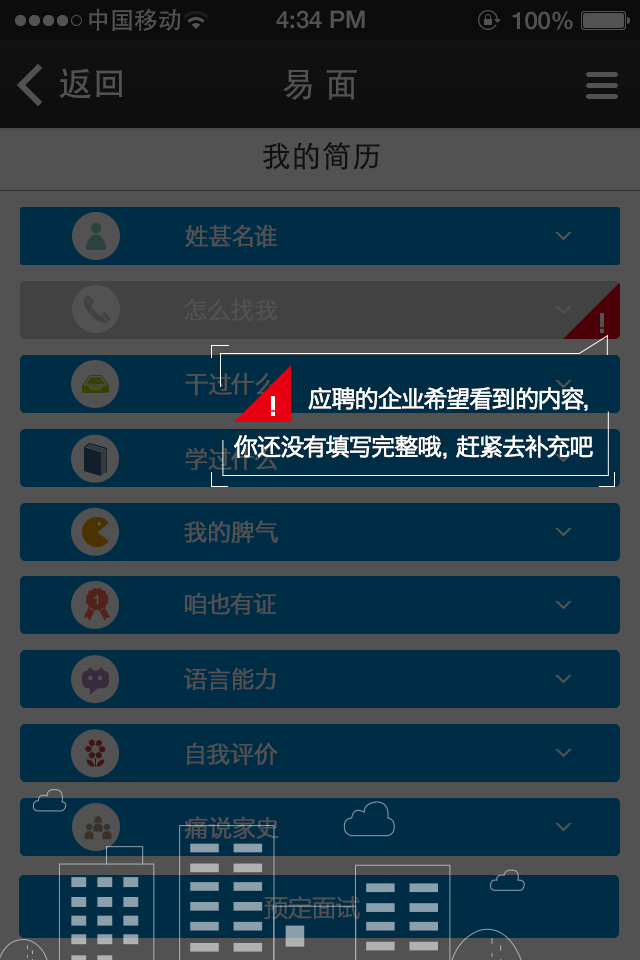
<style>
.page{position:relative;width:640px;height:960px;background:#002d46}
.page>*{position:absolute;margin:0}
.t1{font:24px "AdobeHeitiStd-Regular";color:#525252}
.t2{font:24px "HelveticaNeue-Medium";color:#525252}
.t3{font:34px "AdobeHeitiStd-Regular";color:#525252}
.t4{font:34px "STHeitiSC-Light";color:#525252;font-weight:bold}
.t5{font:29.2px "STHeitiSC-Light";color:#101010;font-weight:bold}
.t6{font:24px "HiraginoSansGB-W3";letter-spacing:-0.025em;color:#525252;font-weight:bold}
.t7{font:24px/48px "HiraginoSansGB-W3";letter-spacing:-0.025em;color:#ffffff}
.t8{font:24px "MicrosoftYaHei";color:#525252}
</style>
<div class="page">
<p class="t1" style="left:89px;top:8px;width:92px;height:23px">中国移动</p>
<p class="t2" style="left:276px;top:10px;width:89px;height:19px">4:34 PM</p>
<p class="t2" style="left:512px;top:11px;width:61px;height:19px">100%</p>
<p class="t3" style="left:59px;top:68px;width:63px;height:31px">返回</p>
<p class="t4" style="left:283px;top:69px;width:74px;height:31px">易 面</p>
<p class="t5" style="left:263px;top:142px;width:117px;height:28px">我的简历</p>
<p class="t6" style="left:185px;top:224px;width:92px;height:24px">姓甚名谁</p>
<p class="t6" style="left:184px;top:298px;width:94px;height:23px">怎么找我</p>
<p class="t6" style="left:185px;top:373px;width:93px;height:23px">干过什么</p>
<p class="t7" style="left:234px;top:386px;width:359px;height:73px">应聘的企业希望看到的内容，<br>你还没有填写完整哦，赶紧去补充吧</p>
<p class="t6" style="left:185px;top:448px;width:92px;height:22px">学过什么</p>
<p class="t6" style="left:184px;top:520px;width:94px;height:23px">我的脾气</p>
<p class="t6" style="left:184px;top:592px;width:92px;height:23px">咱也有证</p>
<p class="t6" style="left:184px;top:667px;width:92px;height:24px">语言能力</p>
<p class="t6" style="left:187px;top:742px;width:91px;height:23px">自我评价</p>
<p class="t6" style="left:184px;top:816px;width:95px;height:23px">痛说家史</p>
<p class="t8" style="left:264px;top:896px;width:96px;height:24px">预定面试</p>
</div>
